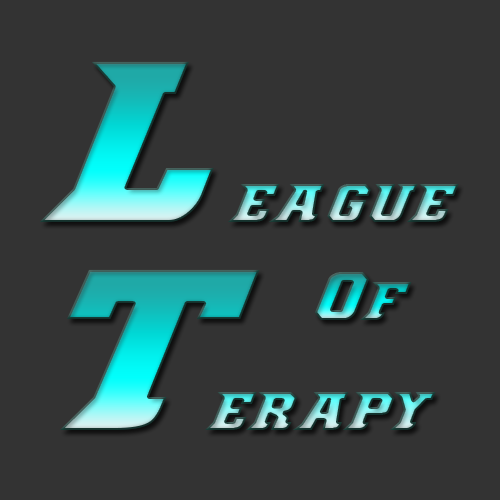
<style>
.page{position:relative;width:500px;height:500px;background:#333333}
.page>*{position:absolute;margin:0}
.t1{font:48px "Demonized";letter-spacing:0.055em;text-transform:uppercase}
.t2{font:200px "Demonized";letter-spacing:0.055em;text-transform:uppercase}
.t3{font:60px "Demonized";letter-spacing:0.055em;text-transform:uppercase}
</style>
<div class="page">
<p class="t1" style="left:39px;top:61px;width:420px;height:161px"><span class="t2">L</span>EAGUE</p>
<p class="t1" style="left:60px;top:269px;width:376px;height:161px"><span class="t2">T</span>ERAPY</p>
<p class="t3" style="left:315px;top:272px;width:97px;height:48px">O<span class="t1">F</span></p>
</div>
